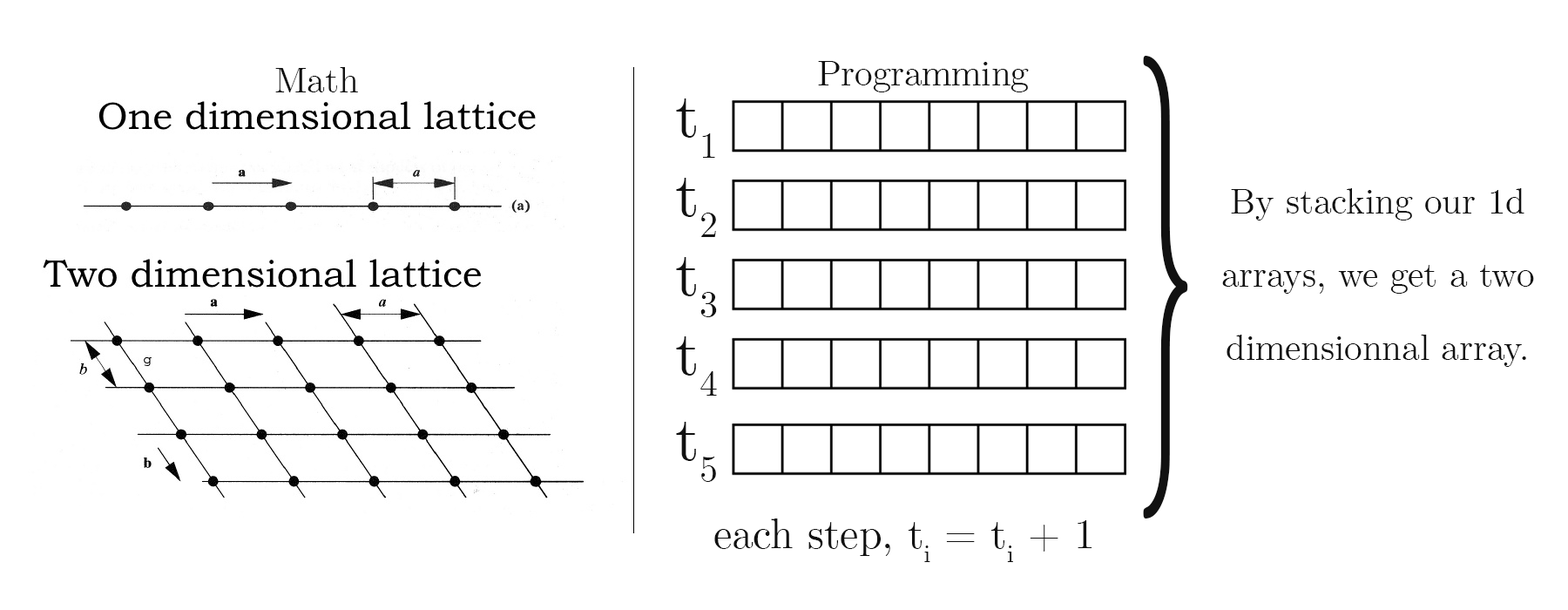
<style>
.page{position:relative;width:1568px;height:610px;background:#ffffff}
.page>*{position:absolute;margin:0}
.t1{font:61px "CMUSerif-Roman";color:#111111}
.t2{font:794.2px "CMUSerif-Roman";color:#111111;scale:0.27 1}
.t3{font:62.7px "CMUSerif-Roman";color:#111111}
.t4{font:62.5px "CMUSerif-Roman";color:#111111}
.t5{font:41.8px "CMUSerif-Roman";color:#111111}
</style>
<div class="page">
<p class="t1" style="left:818px;top:61px;width:211px;height:31px">Programming</p>
<p class="t2" style="left:1143px;top:56px;width:45px;height:462px">}</p>
<p class="t1" style="left:275px;top:67px;width:83px;height:25px">Math</p>
<p class="t3" style="left:676px;top:98px;width:39px;height:60px">t1</p>
<p class="t4" style="left:676px;top:178px;width:40px;height:59px">t2</p>
<p class="t1" style="left:1222px;top:188px;width:312px;height:179px;text-align:center">By stacking our 1d arrays, we get a two dimensionnal array.</p>
<p class="t4" style="left:676px;top:257px;width:41px;height:60px">t3</p>
<p class="t4" style="left:676px;top:336px;width:41px;height:59px">t4</p>
<p class="t4" style="left:676px;top:422px;width:40px;height:60px">t5</p>
<p class="t5" style="left:714px;top:518px;width:378px;height:44px">each step, ti = ti + 1</p>
</div>
